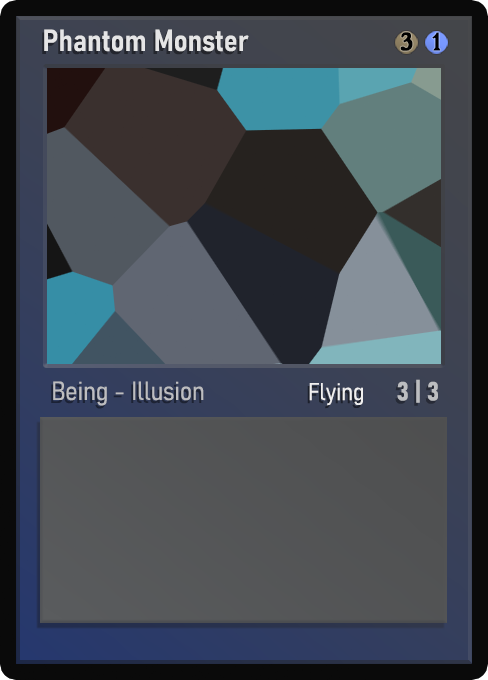
<style>
.page{position:relative;width:488px;height:680px}
.page>*{position:absolute;margin:0}
.t1{font:30px "Bahnschrift-SemiBoldSemiCondensed";color:#f2f2f2;font-weight:bold}
.t2{font:25px "WTRRoycroft";color:#000000;font-weight:bold;scale:1.09 1}
.t3{font:26px "Bahnschrift-LightSemiCondensed";color:#c8c8c8;font-weight:bold}
.t4{font:24px "Bahnschrift-LightSemiCondensed";color:#f0efef;font-weight:bold}
.t5{font:26px "Bahnschrift-BoldSemiCondensed";color:#bcbdc0;font-weight:bold}
</style>
<div class="page">
<p class="t1" style="left:44px;top:29px;width:205px;height:23px;opacity:0.9">Phantom Monster</p>
<p class="t2" style="left:400px;top:32px;width:13px;height:19px">3</p>
<p class="t2" style="left:432px;top:32px;width:9px;height:19px">1</p>
<p class="t3" style="left:53px;top:381px;width:151px;height:25px;opacity:0.9">Being - Illusion</p>
<p class="t4" style="left:309px;top:383px;width:54px;height:23px">Flying</p>
<p class="t5" style="left:397px;top:379px;width:41px;height:24px">3 | 3</p>
</div>
